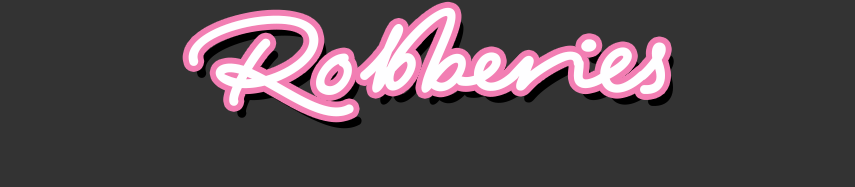
<style>
.page{position:relative;width:855px;height:187px;background:#333333}
.page>*{position:absolute;margin:0}
.t1{font:137.5px "RespondentPERSONALUSEONLY-BlackPERSONALUSEONLY";color:#fefeff}
</style>
<div class="page">
<p class="t1" style="left:188px;top:7px;width:478px;height:110px">Robberies</p>
</div>
